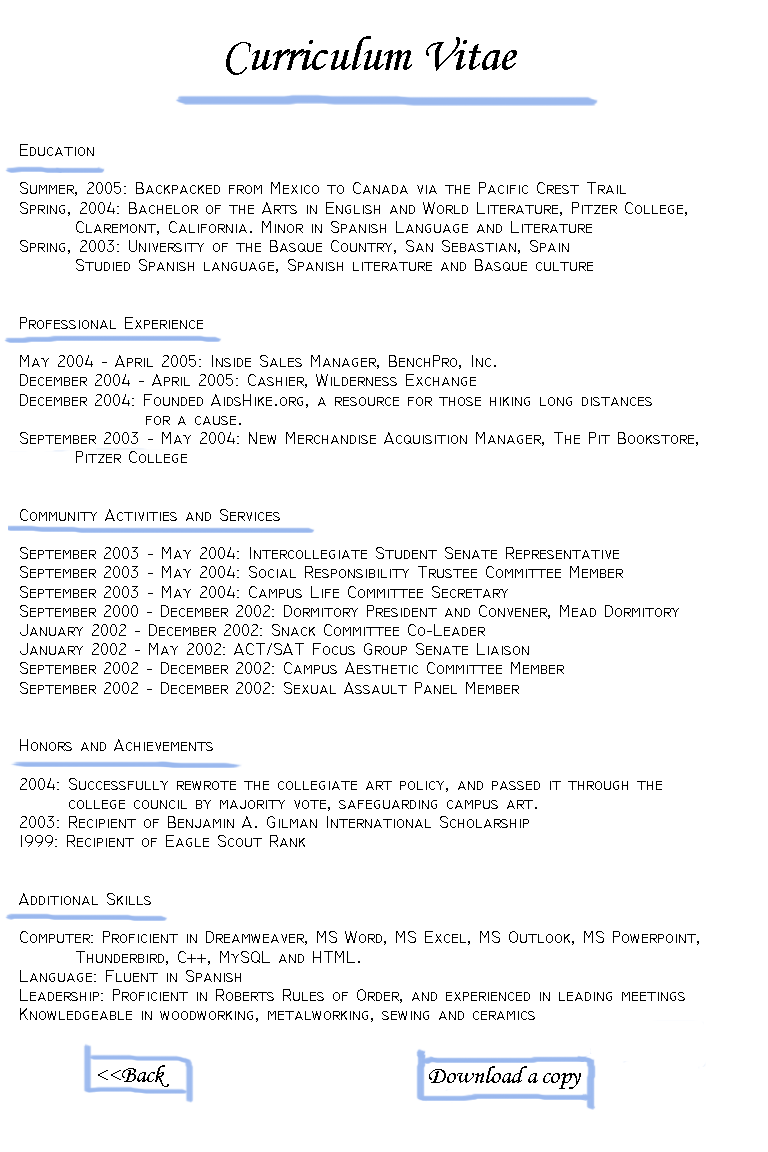
<style>
.page{position:relative;width:768px;height:1152px;background:#ffffff}
.page>*{position:absolute;margin:0}
.t1{font:48px "MonotypeCorsiva";color:#000000}
.t2{font:16px "TechnicLite";color:#000000}
.t3{font:24px "MonotypeCorsiva";color:#000000}
</style>
<div class="page">
<p class="t1" style="left:226px;top:36px;width:291px;height:39px">Curriculum Vitae</p>
<p class="t2" style="left:19px;top:144px;width:680px;height:878px">Education<br><br>Summer, 2005: Backpacked from Mexico to Canada via the Pacific Crest Trail<br>Spring, 2004: Bachelor of the Arts in English and World Literature, Pitzer College, <br>        Claremont, California. Minor in Spanish Language and Literature<br>Spring, 2003: University of the Basque Country, San Sebastian, Spain<br>        Studied Spanish language, Spanish literature and Basque culture<br><br><br>Professional Experience<br><br>May 2004 - April 2005: Inside Sales Manager, BenchPro, Inc.<br>December 2004 - April 2005: Cashier, Wilderness Exchange<br>December 2004: Founded AidsHike.org, a resource for those hiking long distances<br>                  for a cause.<br>September 2003 - May 2004: New Merchandise Acquisition Manager, The Pit Bookstore, <br>        Pitzer College<br><br><br>Community Activities and Services<br><br>September 2003 - May 2004: Intercollegiate Student Senate Representative<br>September 2003 - May 2004: Social Responsibility Trustee Committee Member<br>September 2003 - May 2004: Campus Life Committee Secretary<br>September 2000 - December 2002: Dormitory President and Convener, Mead Dormitory<br>January 2002 - December 2002: Snack Committee Co-Leader<br>January 2002 - May 2002: ACT/SAT Focus Group Senate Liaison<br>September 2002 - December 2002: Campus Aesthetic Committee Member<br>September 2002 - December 2002: Sexual Assault Panel Member<br><br><br>Honors and Achievements<br><br>2004: Successfully rewrote the collegiate art policy, and passed it through the <br>       college council by majority vote, safeguarding campus art.<br>2003: Recipient of Benjamin A. Gilman International Scholarship<br>1999: Recipient of Eagle Scout Rank<br><br><br>Additional Skills<br><br>Computer: Proficient in Dreamweaver, MS Word, MS Excel, MS Outlook, MS Powerpoint, <br>        Thunderbird, C++, MySQL and HTML.<br>Language: Fluent in Spanish<br>Leadership: Proficient in Roberts Rules of Order, and experienced in leading meetings<br>Knowledgeable in woodworking, metalworking, sewing and ceramics</p>
<p class="t3" style="left:98px;top:1065px;width:71px;height:22px">&lt;&lt;Back</p>
<p class="t3" style="left:429px;top:1066px;width:152px;height:23px">Download a copy</p>
</div>
